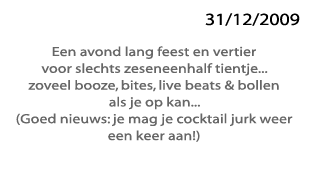
<style>
.page{position:relative;width:309px;height:171px;background:#ffffff}
.page>*{position:absolute;margin:0}
.t1{font:17.1px "MyriadPro-Regular";color:#000000;scale:1.16 1}
.t2{font:13.3px "Myriad-Web";color:#666666;scale:1.16 1}
</style>
<div class="page">
<p class="t1" style="left:205px;top:13px;width:95px;height:13px">31/12/2009</p>
<p class="t2" style="left:16px;top:46px;width:277px;height:96px;text-align:center">Een avond lang feest en vertier<br>voor slechts zeseneenhalf tientje...<br>zoveel booze, bites, live beats &amp; bollen<br>als je op kan...<br>(Goed nieuws: je mag je cocktail jurk weer<br>een keer aan!)</p>
</div>
